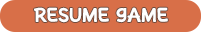
<style>
.page{position:relative;width:201px;height:32px;background:#d86f48}
.page>*{position:absolute;margin:0}
.t1{font:21.2px "PLAYFULCHILD";color:#ffffff}
</style>
<div class="page">
<p class="t1" style="left:34px;top:7px;width:134px;height:16px">rESUME GAME</p>
</div>
